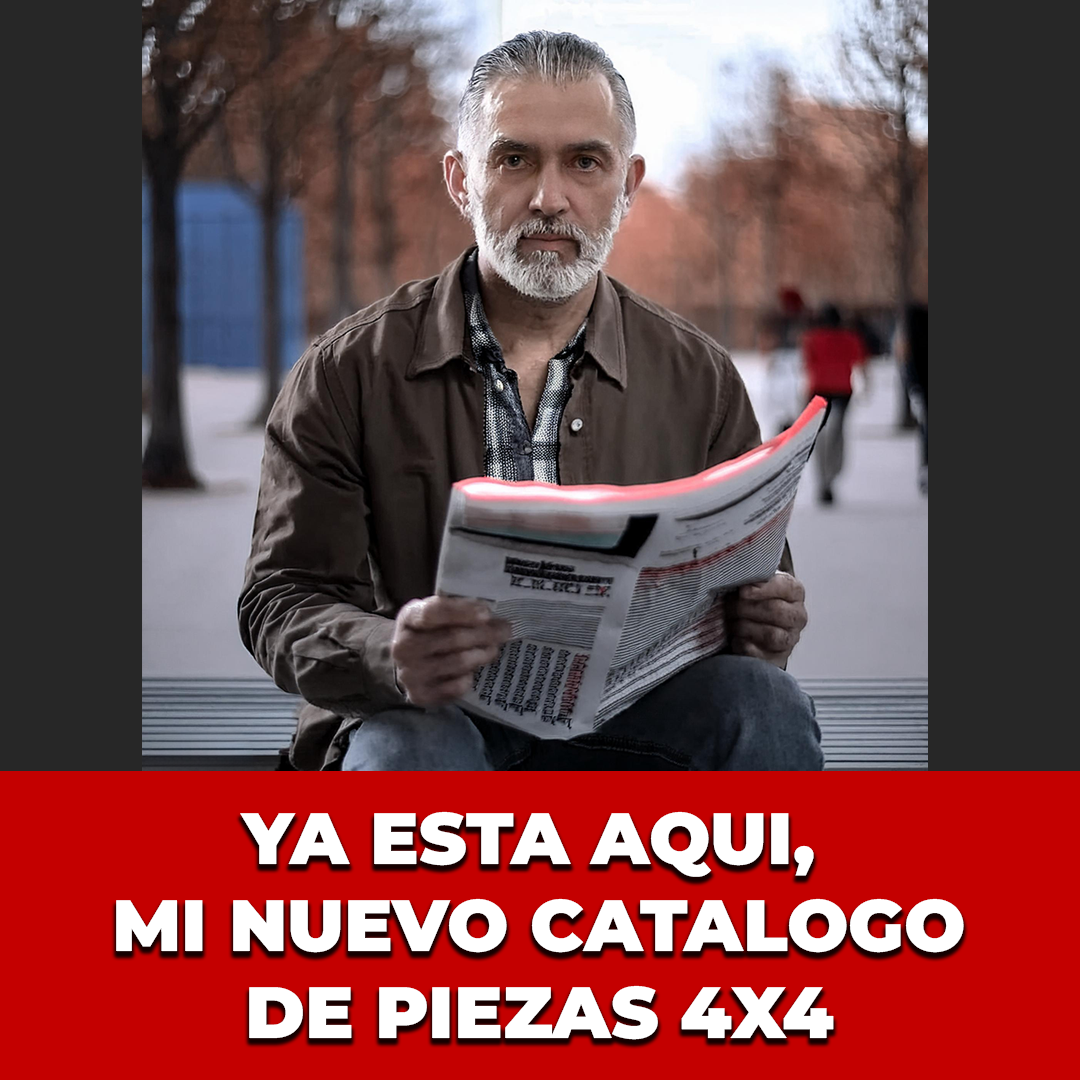
<style>
.page{position:relative;width:1080px;height:1080px}
.page>*{position:absolute;margin:0}
.t1{font:72.5px "MontserratRoman-Black";color:#ffffff;text-transform:uppercase}
</style>
<div class="page">
<p class="t1" style="left:116px;top:811px;width:848px;height:229px;text-align:center">YA ESTA AQUI, <br>MI NUEVO CATALOGO<br>DE PIEZAS 4X4</p>
</div>
